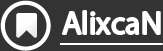
<style>
.page{position:relative;width:163px;height:51px;background:#333333}
.page>*{position:absolute;margin:0}
.t1{font:32.3px "MyriadPro-Regular";color:#ffffff}
</style>
<div class="page">
<p class="t1" style="left:62px;top:11px;width:98px;height:23px">AlixcaN</p>
</div>
